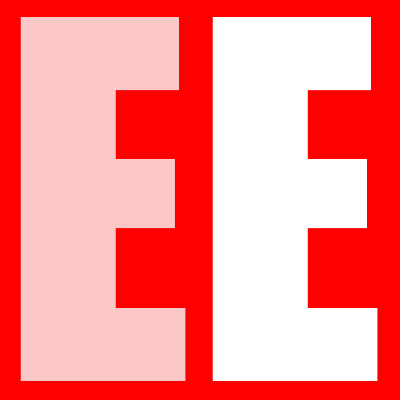
<style>
.page{position:relative;width:400px;height:400px;background:#ff0000}
.page>*{position:absolute;margin:0}
.t1{font:461.2px "Impact";color:#fcc7c7}
.t2{font:461.2px "Impact";color:#ffffff}
</style>
<div class="page">
<p class="t1" style="left:20px;top:17px;width:358px;height:364px">E<span class="t2">E</span></p>
</div>
